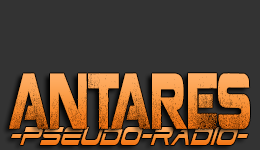
<style>
.page{position:relative;width:260px;height:150px;background:#333333}
.page>*{position:absolute;margin:0}
.t1{font:78.1px "Coalition";color:#fca454;scale:0.47 1}
.t2{font:31.6px "DodgerCondensedItalic";scale:0.75 1}
</style>
<div class="page">
<p class="t1" style="left:9px;top:73px;width:241px;height:56px">ANTARES</p>
<p class="t2" style="left:11px;top:127px;width:237px;height:18px">-pseudo-RADIO-</p>
</div>
